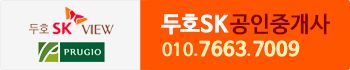
<style>
.page{position:relative;width:350px;height:70px;background:#ff5400}
.page>*{position:absolute;margin:0}
.t1{font:22px "NanumBarunGothicOTF";color:#7f0101;font-weight:bold}
.t2{font:22px "NanumBarunGothicOTFBold";color:#ffffff;font-weight:bold}
.t3{font:19.2px "NanumBarunGothicOTFBold";color:#fef3b4;font-weight:bold}
.t4{font:17.1px "NanumBarunGothicOTF";color:#fef3b4;font-weight:bold}
.t5{font:19.2px "NanumBarunGothicOTFUltraLight";color:#fef3b4;font-weight:bold}
</style>
<div class="page">
<p class="t1" style="left:161px;top:13px;width:169px;height:22px"><span class="t2">두호SK </span>공인중개사</p>
<p class="t3" style="left:162px;top:40px;width:138px;height:17px"><span class="t4">010</span><span class="t5">.</span>7663<span class="t5">.</span>7009</p>
</div>
